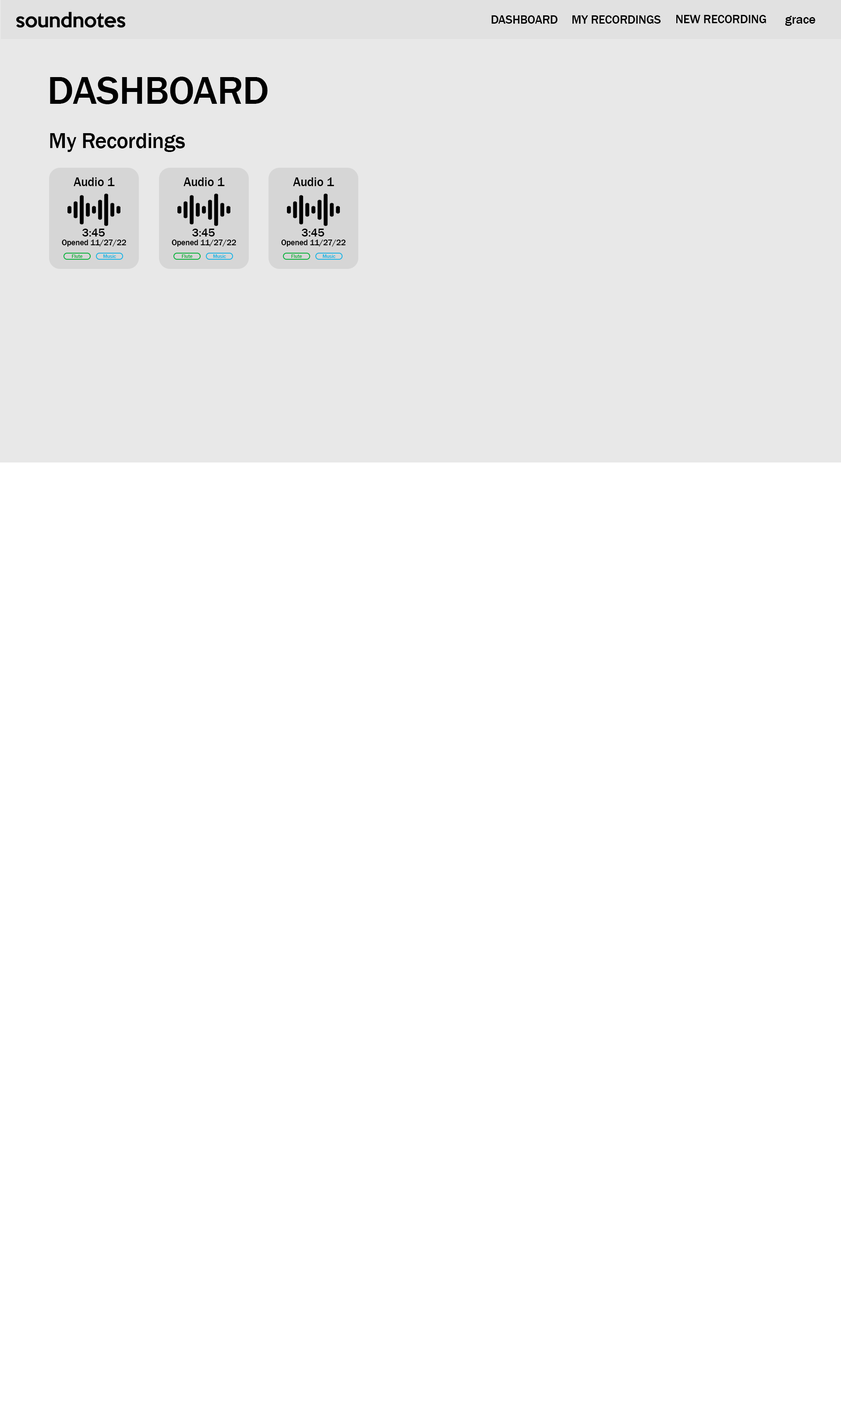
<style>
.page{position:relative;width:841px;height:1419px;background:#ffffff}
.page>*{position:absolute;margin:0}
.t1{font:12.2px "FranklinGothic-Medium";letter-spacing:-0.01em;color:#000000}
.t2{font:13.1px "FranklinGothic-Medium";letter-spacing:-0.01em;color:#000000}
.t3{font:40.3px "FranklinGothic-Medium";letter-spacing:-0.01em;color:#000000}
.t4{font:22.2px "FranklinGothic-Medium";letter-spacing:-0.01em;color:#000000}
.t5{font:12.7px "FranklinGothic-Medium";letter-spacing:-0.01em;color:#000000}
.t6{font:11.7px "FranklinGothic-Medium";letter-spacing:-0.01em;color:#000000}
.t7{font:8.2px "FranklinGothic-Medium";letter-spacing:-0.01em;color:#000000}
.t8{font:5.2px "FranklinGothic-Medium";letter-spacing:-0.01em;color:#00b034}
.t9{font:5.2px "FranklinGothic-Medium";letter-spacing:-0.01em;color:#15b2e5}
</style>
<div class="page">
<p class="t1" style="left:491px;top:15px;width:66px;height:9px">DASHBOARD</p>
<p class="t1" style="left:572px;top:15px;width:89px;height:9px">MY RECORDINGS</p>
<p class="t1" style="left:676px;top:15px;width:90px;height:8px">NEW RECORDING</p>
<p class="t2" style="left:785px;top:16px;width:30px;height:10px">grace</p>
<p class="t3" style="left:50px;top:77px;width:218px;height:27px">DASHBOARD</p>
<p class="t4" style="left:50px;top:133px;width:135px;height:19px">My Recordings</p>
<p class="t5" style="left:74px;top:177px;width:41px;height:9px">Audio 1</p>
<p class="t5" style="left:183px;top:177px;width:42px;height:9px">Audio 1</p>
<p class="t5" style="left:293px;top:177px;width:41px;height:9px">Audio 1</p>
<p class="t6" style="left:82px;top:229px;width:23px;height:7px">3:45</p>
<p class="t6" style="left:192px;top:229px;width:23px;height:7px">3:45</p>
<p class="t6" style="left:301px;top:229px;width:23px;height:7px">3:45</p>
<p class="t7" style="left:62px;top:239px;width:64px;height:7px">Opened 11/27/22</p>
<p class="t7" style="left:172px;top:239px;width:64px;height:7px">Opened 11/27/22</p>
<p class="t7" style="left:281px;top:239px;width:64px;height:7px">Opened 11/27/22</p>
<p class="t8" style="left:72px;top:254px;width:11px;height:4px">Flute</p>
<p class="t9" style="left:103px;top:254px;width:13px;height:4px">Music</p>
<p class="t8" style="left:182px;top:254px;width:11px;height:4px">Flute</p>
<p class="t9" style="left:213px;top:254px;width:13px;height:4px">Music</p>
<p class="t8" style="left:291px;top:254px;width:11px;height:4px">Flute</p>
<p class="t9" style="left:323px;top:254px;width:12px;height:4px">Music</p>
</div>
